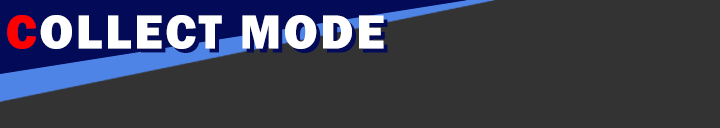
<style>
.page{position:relative;width:720px;height:128px;background:#333333}
.page>*{position:absolute;margin:0}
.t1{font:49.4px "FranklinGothic-Heavy";letter-spacing:0.05em;color:#ffffff}
.t2{font:49.4px "FranklinGothic-Heavy";letter-spacing:0.05em;color:#ff0000}
</style>
<div class="page">
<p class="t1" style="left:7px;top:15px;width:377px;height:34px"><span class="t2">C</span>OLLECT MODE</p>
</div>
